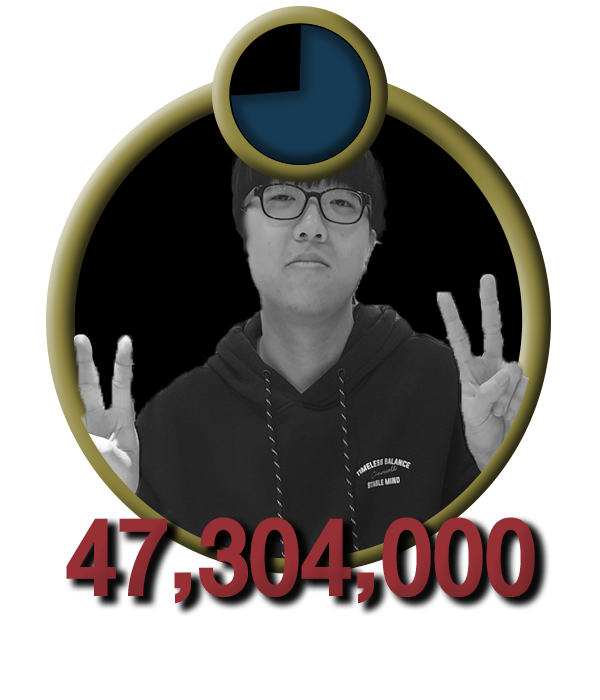
<style>
.page{position:relative;width:600px;height:700px;background:#ffffff}
.page>*{position:absolute;margin:0}
.t1{font:92px "SDDol-cBd";color:#973035}
</style>
<div class="page">
<p class="t1" style="left:66px;top:517px;width:469px;height:87px">47,304,000</p>
</div>
